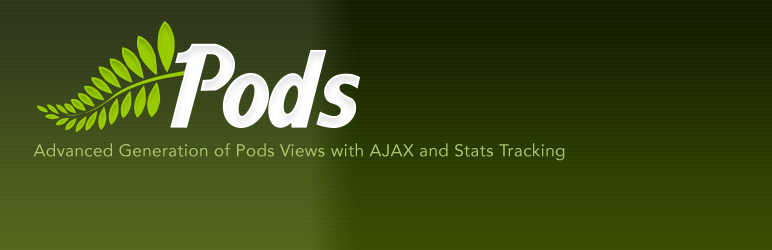
<style>
.page{position:relative;width:772px;height:250px}
.page>*{position:absolute;margin:0}
.t1{font:17px "Avenir-Roman";letter-spacing:0.025em;color:#aec470}
</style>
<div class="page">
<p class="t1" style="left:33px;top:143px;width:532px;height:18px">Advanced Generation of Pods Views with AJAX and Stats Tracking</p>
</div>
